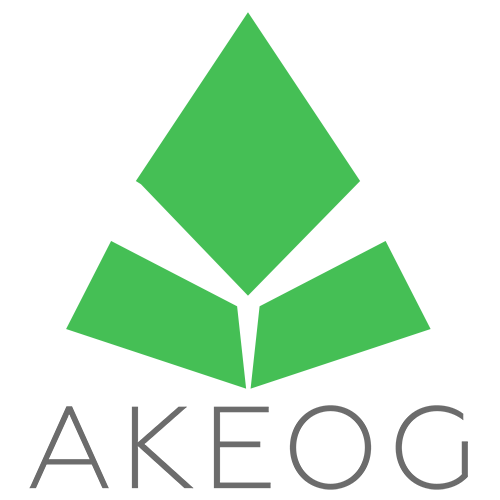
<style>
.page{position:relative;width:500px;height:500px;background:#ffffff}
.page>*{position:absolute;margin:0}
.t1{font:116px "Geometria-Light";letter-spacing:0.04em;color:#6c6c6c;font-weight:bold}
</style>
<div class="page">
<p class="t1" style="left:29px;top:405px;width:439px;height:85px">AKEOG</p>
</div>
